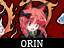
<style>
.page{position:relative;width:64px;height:48px}
.page>*{position:absolute;margin:0}
.t1{font:10px "Cambria";color:#ffffff}
</style>
<div class="page">
<p class="t1" style="left:21px;top:40px;width:22px;height:7px">ORIN</p>
</div>
